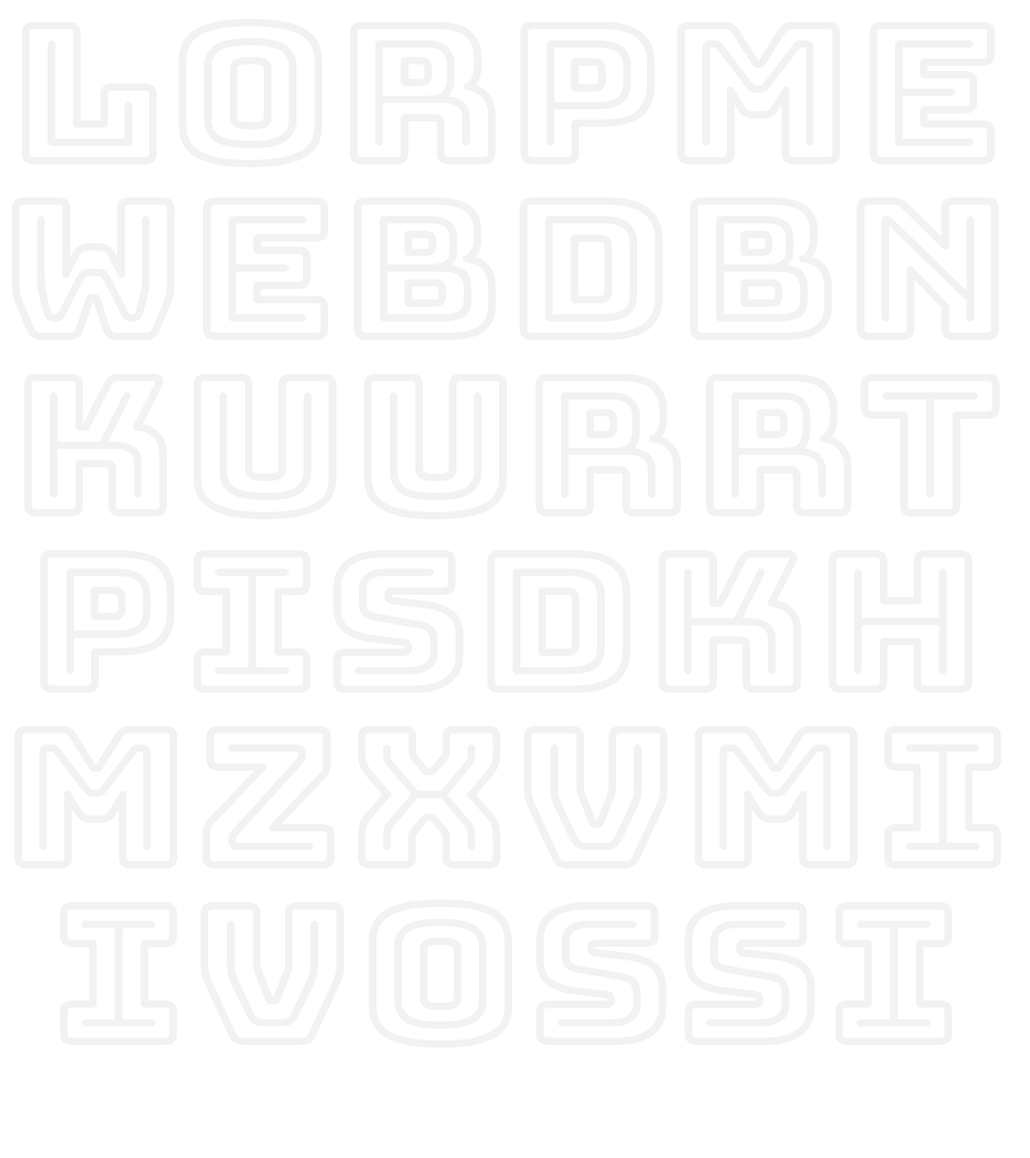
<style>
.page{position:relative;width:1030px;height:1158px;background:#ffffff}
.page>*{position:absolute;margin:0}
.t1{font:185.5px/176.2px "BungeeOutline-Regular";letter-spacing:0.02em;color:#f2f2f2;font-weight:bold;scale:1.16 1}
</style>
<div class="page">
<p class="t1" style="left:11px;top:19px;width:990px;height:1029px;text-align:center">lorpme<br>webdbn<br>kuurrt<br>pisdkh<br>mzxvmi<br>ivossi</p>
</div>
